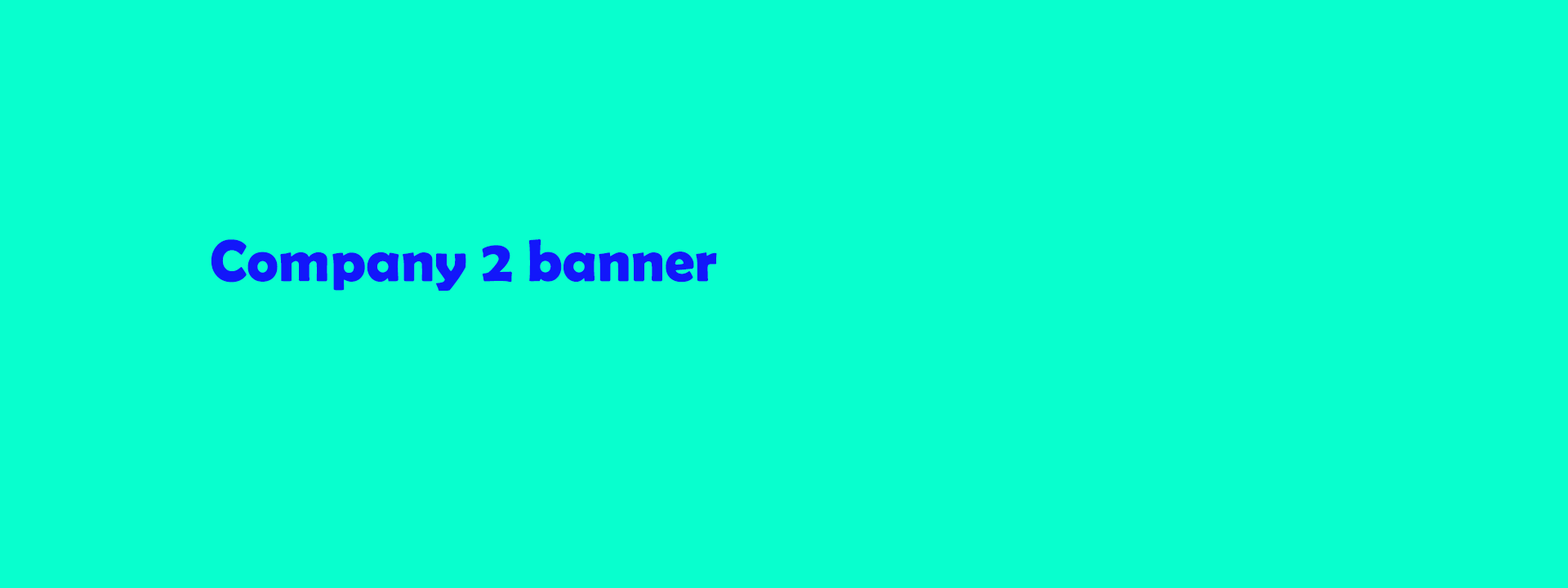
<style>
.page{position:relative;width:1568px;height:588px;background:#08ffce}
.page>*{position:absolute;margin:0}
.t1{font:59.3px "BerlinSansFBDemi-Bold";color:#1217fa}
</style>
<div class="page">
<p class="t1" style="left:211px;top:239px;width:506px;height:52px">Company 2 banner</p>
</div>
